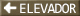
<style>
.page{position:relative;width:80px;height:16px}
.page>*{position:absolute;margin:0}
.t1{font:14.6px "Consolas";letter-spacing:-0.04em;color:#ffffff;scale:0.96 1}
</style>
<div class="page">
<p class="t1" style="left:20px;top:3px;width:56px;height:11px">ELEVADOR</p>
</div>
